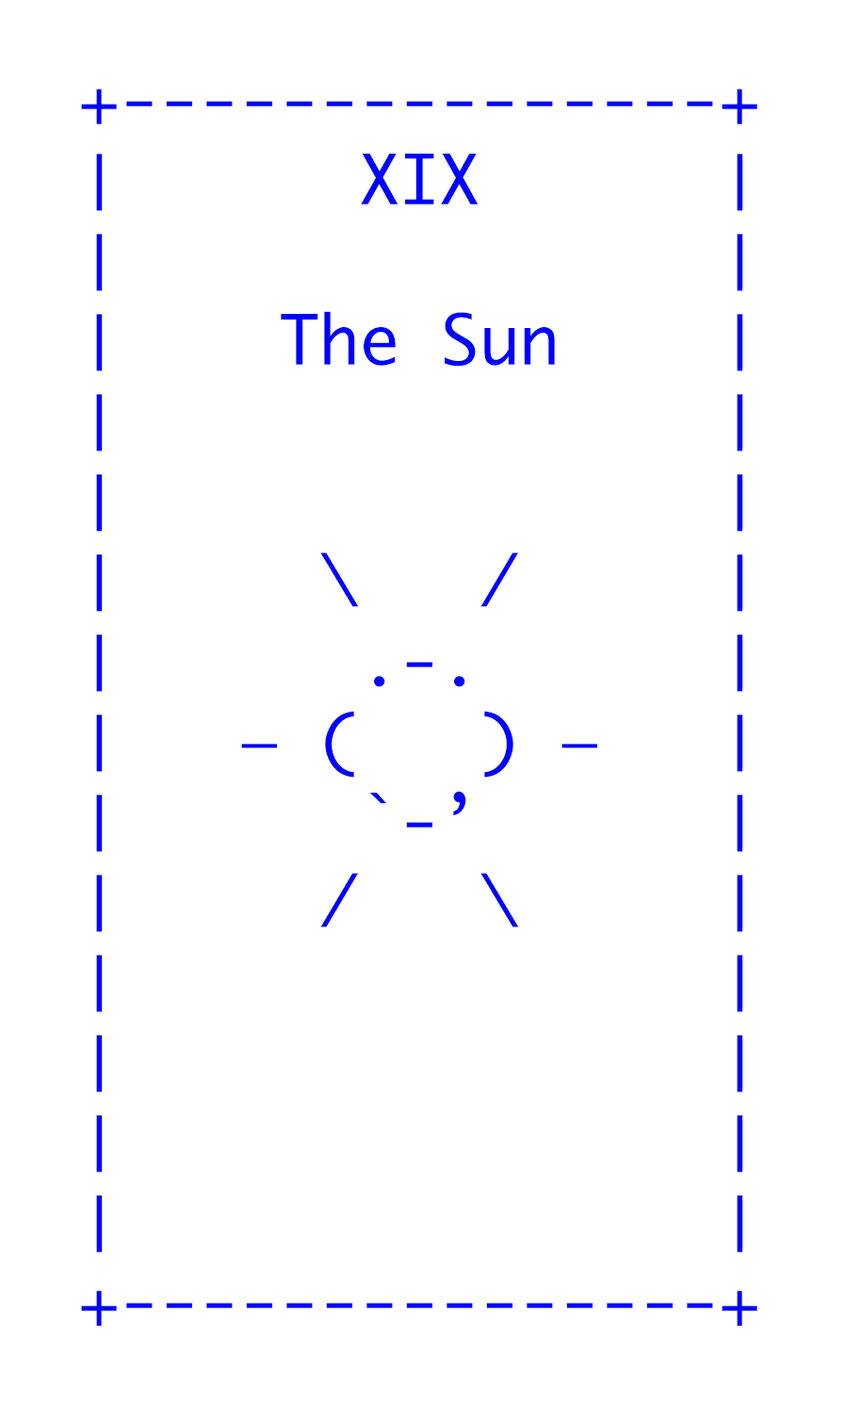
<style>
.page{position:relative;width:845px;height:1411px;background:#ffffff}
.page>*{position:absolute;margin:0}
.t1{font:66.7px "Monaco";color:#0000ff}
</style>
<div class="page">
<p class="t1" style="left:81px;top:89px;width:677px;height:1237px">+---------------+<br>│      XIX      │<br>│               │<br>│    The Sun    │<br>│               │<br>│               │<br>│     \   /     │ <br>│      .-.      │ <br>│   ― (   ) ―   │ <br>│      `-’      │  <br>│     /   \     │<br>│               │<br>│               │<br>│               │<br>│               │<br>+---------------+</p>
</div>
